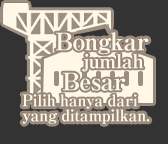
<style>
.page{position:relative;width:168px;height:144px;background:#333333}
.page>*{position:absolute;margin:0}
.t1{font:24px/18px "RyuminPro-ExBold";letter-spacing:-0.04em;color:#fff8e6}
.t2{font:19.6px/18px "RyuminPro-ExBold";letter-spacing:-0.04em;color:#fff8e6}
.t3{font:16px/15px "RyuminPro-ExBold";letter-spacing:-0.04em;color:#fff8e6}
</style>
<div class="page">
<p class="t1" style="left:55px;top:32px;width:94px;height:59px">Bongkar<br>    <span class="t2">jumlah<br> </span>Besar</p>
<p class="t3" style="left:22px;top:94px;width:128px;height:30px">Pilih hanya dari<br>yang ditampilkan.</p>
</div>
